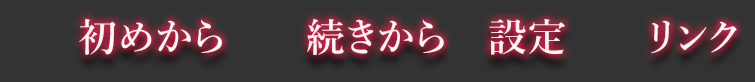
<style>
.page{position:relative;width:755px;height:82px;background:#333333}
.page>*{position:absolute;margin:0}
.t1{font:38.9px "YuMincho-Demibold";letter-spacing:0.025em;color:#ffffff}
</style>
<div class="page">
<p class="t1" style="left:79px;top:18px;width:658px;height:37px">初めから　　続きから　設定　　リンク</p>
</div>
